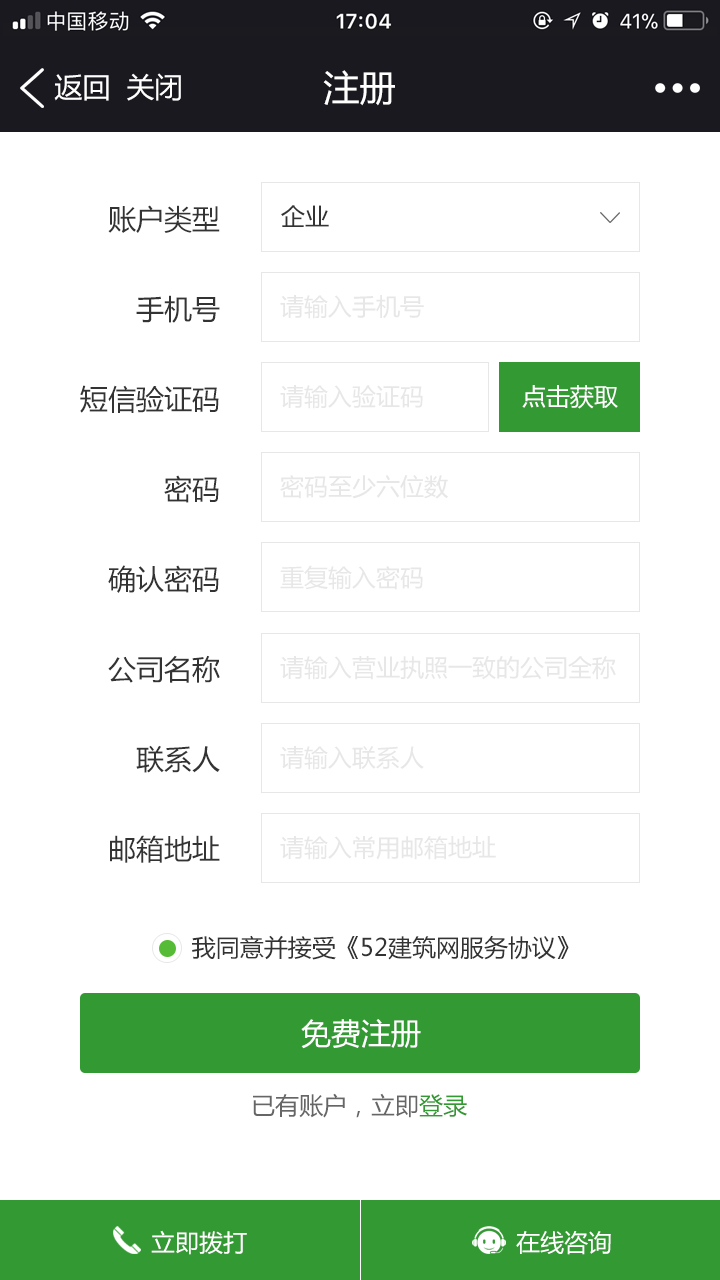
<style>
.page{position:relative;width:720px;height:1280px;background:#ffffff}
.page>*{position:absolute;margin:0}
.t1{font:28px "MicrosoftYaHei";color:#ffffff}
.t2{font:36px "MicrosoftYaHei";color:#ffffff}
.t3{font:28px/90px "MicrosoftYaHei";color:#333333}
.t4{font:24px "MicrosoftYaHei";color:#333333}
.t5{font:24px "MicrosoftYaHei";color:#e7e7e7}
.t6{font:24px "MicrosoftYaHei";color:#ffffff}
.t7{font:30px "MicrosoftYaHei";color:#ffffff}
.t8{font:24px "MicrosoftYaHei";color:#666666}
.t9{font:24px "MicrosoftYaHei";color:#339933}
</style>
<div class="page">
<p class="t1" style="left:54px;top:74px;width:55px;height:27px">返回</p>
<p class="t1" style="left:127px;top:73px;width:54px;height:28px">关闭</p>
<p class="t2" style="left:323px;top:70px;width:72px;height:36px">注册</p>
<p class="t3" style="left:80px;top:205px;width:140px;height:658px;text-align:right">账户类型<br>手机号<br>短信验证码<br>密码<br>确认密码<br>公司名称<br>联系人<br>邮箱地址</p>
<p class="t4" style="left:281px;top:205px;width:48px;height:22px">企业</p>
<p class="t5" style="left:280px;top:295px;width:144px;height:24px">请输入手机号</p>
<p class="t5" style="left:280px;top:385px;width:143px;height:24px">请输入验证码</p>
<p class="t6" style="left:522px;top:385px;width:96px;height:24px">点击获取</p>
<p class="t5" style="left:280px;top:475px;width:168px;height:24px">密码至少六位数</p>
<p class="t5" style="left:280px;top:565px;width:143px;height:25px">重复输入密码</p>
<p class="t5" style="left:280px;top:655px;width:336px;height:25px">请输入营业执照一致的公司全称</p>
<p class="t5" style="left:280px;top:746px;width:144px;height:24px">请输入联系人</p>
<p class="t5" style="left:280px;top:836px;width:216px;height:24px">请输入常用邮箱地址</p>
<p class="t4" style="left:192px;top:935px;width:377px;height:25px">我同意并接受《52建筑网服务协议》</p>
<p class="t7" style="left:301px;top:1019px;width:120px;height:30px">免费注册</p>
<p class="t8" style="left:253px;top:1093px;width:214px;height:25px">已有账户，立即<span class="t9">登录</span></p>
<p class="t6" style="left:151px;top:1230px;width:96px;height:25px">立即拨打</p>
<p class="t6" style="left:516px;top:1231px;width:95px;height:24px">在线咨询</p>
</div>
